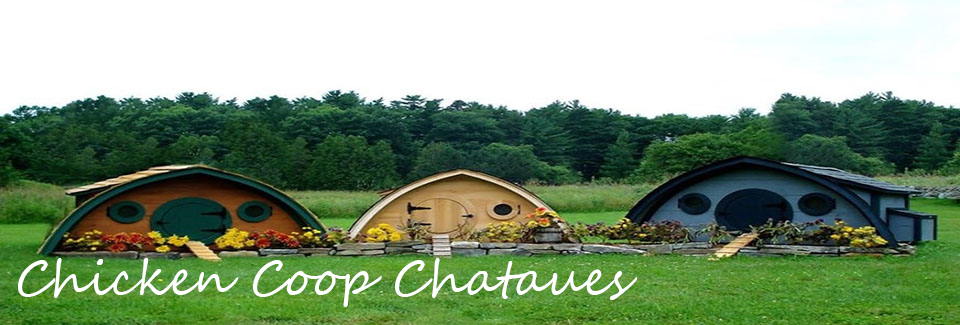
<style>
.page{position:relative;width:960px;height:325px;background:#ffffff}
.page>*{position:absolute;margin:0}
.t1{font:48px "SegoeScript";color:#ffffff}
</style>
<div class="page">
<p class="t1" style="left:18px;top:258px;width:620px;height:49px">Chicken Coop Chataues</p>
</div>
